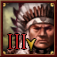
<style>
.page{position:relative;width:57px;height:57px}
.page>*{position:absolute;margin:0}
.t1{font:20px "TrajanPro-Regular";letter-spacing:-0.1em;color:#b31919}
</style>
<div class="page">
<p class="t1" style="left:7px;top:34px;width:20px;height:15px">III</p>
</div>
